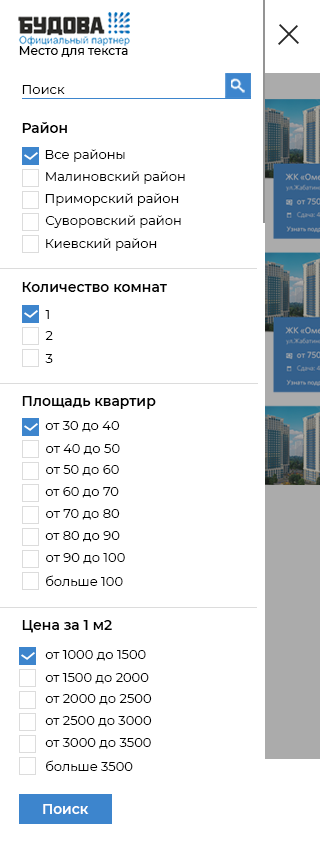
<style>
.page{position:relative;width:320px;height:845px;background:#ffffff}
.page>*{position:absolute;margin:0}
.t1{font:12.1px "Montserrat-Medium";color:#000000}
.t2{font:13px "Montserrat-Regular";color:#010101}
.t3{font:14px "Montserrat-SemiBold";color:#010101}
.t4{font:13px "Montserrat-Regular";color:#000000}
.t5{font:14px "Montserrat-SemiBold";color:#ffffff}
</style>
<div class="page">
<p class="t1" style="left:19px;top:46px;width:109px;height:11px">Место для текста</p>
<p class="t2" style="left:22px;top:85px;width:43px;height:9px">Поиск</p>
<p class="t3" style="left:22px;top:122px;width:45px;height:11px">Район</p>
<p class="t2" style="left:45px;top:149px;width:80px;height:13px">Все районы</p>
<p class="t4" style="left:46px;top:171px;width:139px;height:13px">Малиновский район</p>
<p class="t2" style="left:45px;top:193px;width:134px;height:13px">Приморский район</p>
<p class="t2" style="left:45px;top:215px;width:136px;height:13px">Суворовский район</p>
<p class="t2" style="left:46px;top:238px;width:111px;height:13px">Киевский район</p>
<p class="t3" style="left:22px;top:282px;width:145px;height:10px">Количество комнат</p>
<p class="t4" style="left:45px;top:310px;width:4px;height:9px">1</p>
<p class="t2" style="left:45px;top:331px;width:8px;height:9px">2</p>
<p class="t2" style="left:45px;top:354px;width:8px;height:9px">3</p>
<p class="t3" style="left:22px;top:396px;width:134px;height:13px">Площадь квартир</p>
<p class="t2" style="left:45px;top:421px;width:75px;height:11px">от 30 до 40</p>
<p class="t2" style="left:46px;top:444px;width:74px;height:11px">от 40 до 50</p>
<p class="t2" style="left:46px;top:465px;width:73px;height:11px">от 50 до 60</p>
<p class="t2" style="left:45px;top:487px;width:74px;height:11px">от 60 до 70</p>
<p class="t2" style="left:46px;top:509px;width:74px;height:11px">от 70 до 80</p>
<p class="t2" style="left:45px;top:531px;width:75px;height:11px">от 80 до 90</p>
<p class="t2" style="left:46px;top:553px;width:79px;height:11px">от 90 до 100</p>
<p class="t2" style="left:46px;top:575px;width:77px;height:11px">больше 100</p>
<p class="t3" style="left:22px;top:620px;width:90px;height:13px">Цена за 1 м2</p>
<p class="t2" style="left:45px;top:650px;width:101px;height:11px">от 1000 до 1500</p>
<p class="t2" style="left:45px;top:673px;width:104px;height:11px">от 1500 до 2000</p>
<p class="t2" style="left:45px;top:694px;width:107px;height:11px">от 2000 до 2500</p>
<p class="t2" style="left:45px;top:716px;width:107px;height:11px">от 2500 до 3000</p>
<p class="t2" style="left:45px;top:738px;width:106px;height:11px">от 3000 до 3500</p>
<p class="t2" style="left:46px;top:760px;width:87px;height:11px">больше 3500</p>
<p class="t5" style="left:43px;top:804px;width:46px;height:10px">Поиск</p>
</div>
